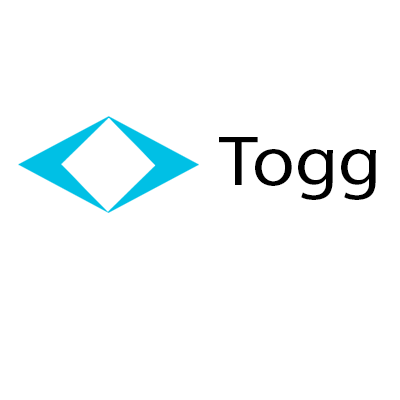
<style>
.page{position:relative;width:400px;height:400px;background:#ffffff}
.page>*{position:absolute;margin:0}
.t1{font:71.8px "MyriadPro-Regular";color:#000000;scale:1.08 1}
</style>
<div class="page">
<p class="t1" style="left:219px;top:137px;width:157px;height:63px">Togg</p>
</div>
